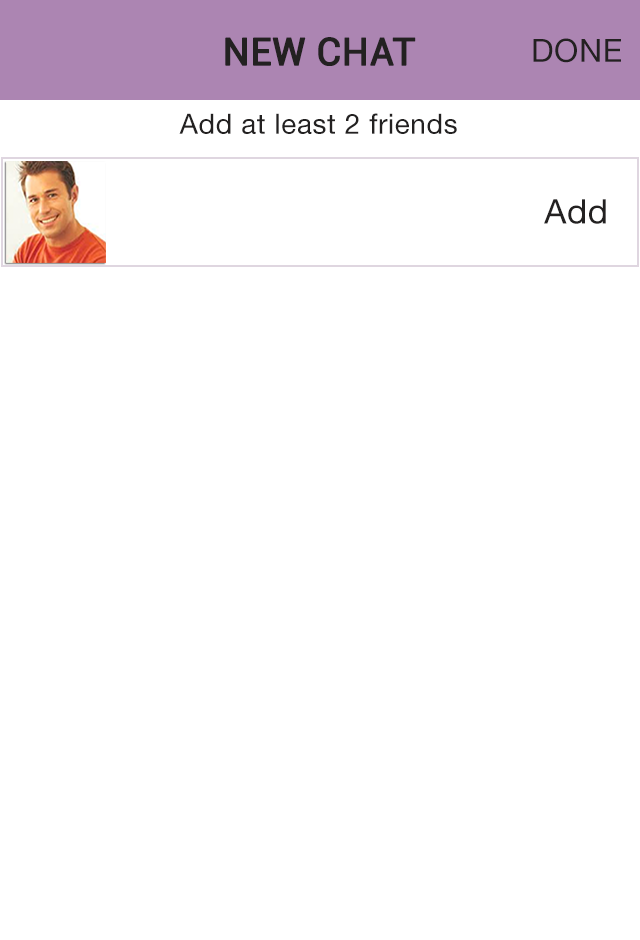
<style>
.page{position:relative;width:640px;height:940px;background:#ffffff}
.page>*{position:absolute;margin:0}
.t1{font:38px "Roboto-Regular";color:#232121;font-weight:bold}
.t2{font:32px "HelveticaNeue";letter-spacing:0.02em;color:#232121}
.t3{font:28px "HelveticaNeue";letter-spacing:0.02em;color:#232121}
.t4{font:34px "HelveticaNeue";letter-spacing:0.02em;color:#232121}
</style>
<div class="page">
<p class="t1" style="left:225px;top:37px;width:191px;height:29px">NEW CHAT</p>
<p class="t2" style="left:533px;top:38px;width:88px;height:25px">DONE</p>
<p class="t3" style="left:179px;top:113px;width:278px;height:21px">Add at least 2 friends</p>
<p class="t4" style="left:544px;top:199px;width:62px;height:25px">Add</p>
</div>
